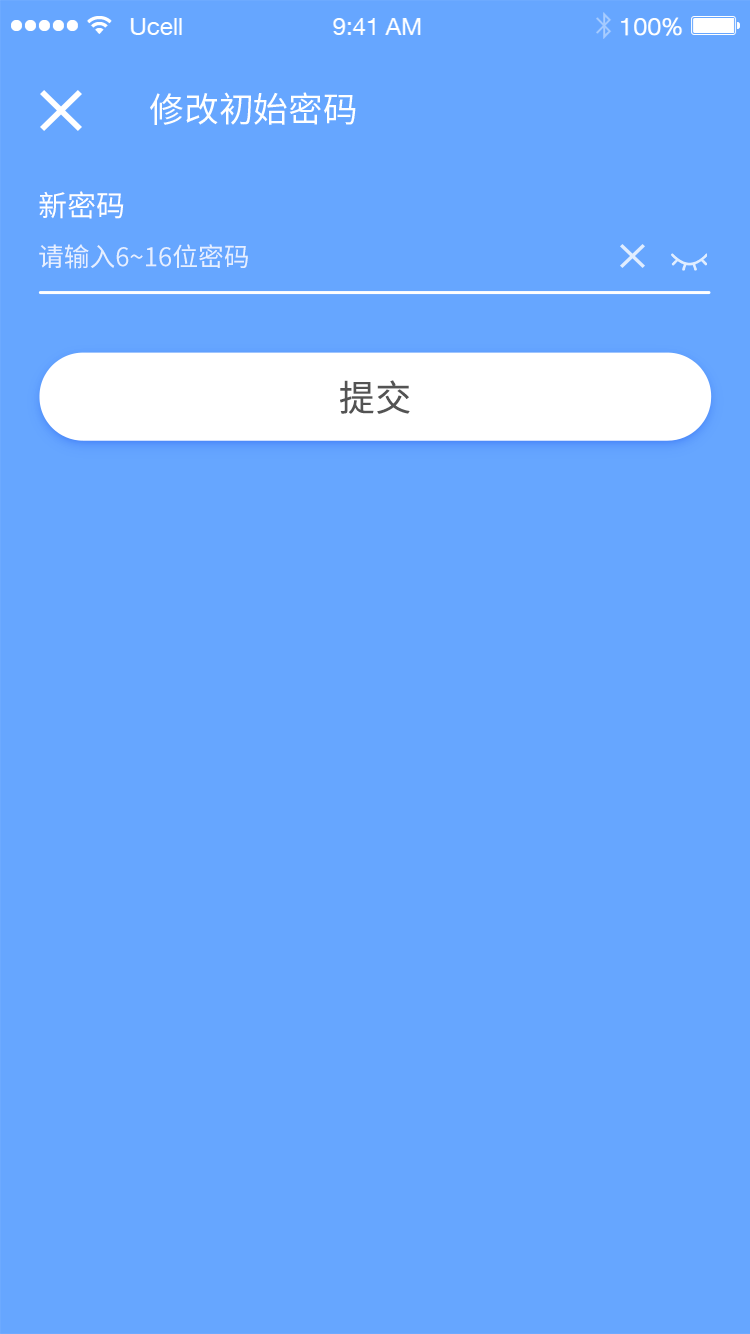
<style>
.page{position:relative;width:750px;height:1334px;background:#66a6ff}
.page>*{position:absolute;margin:0}
.t1{font:34.9px "NotoSansHans-Regular";color:#ffffff}
.t2{font:29.3px "NotoSansHans-Regular";color:#ffffff;text-transform:uppercase}
.t3{font:26px "NotoSansHans-Regular";color:#e6efff;text-transform:uppercase}
.t4{font:36.1px "NotoSansHans-Regular";letter-spacing:0.02em;color:#535353}
</style>
<div class="page">
<p class="t1" style="left:150px;top:92px;width:206px;height:33px">修改初始密码</p>
<p class="t2" style="left:39px;top:191px;width:85px;height:28px">新密码</p>
<p class="t3" style="left:39px;top:244px;width:209px;height:25px">请输入6~16位密码</p>
<p class="t4" style="left:340px;top:380px;width:70px;height:34px">提交</p>
</div>
